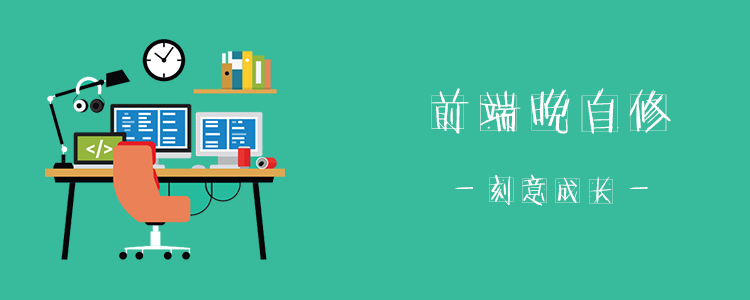
<style>
.page{position:relative;width:750px;height:300px;background:#38bb9c}
.page>*{position:absolute;margin:0}
.t1{font:50px "FZNHT";color:#ffffff}
.t2{font:33.3px "FZNHT";color:#ffffff}
</style>
<div class="page">
<p class="t1" style="left:431px;top:88px;width:240px;height:46px">前端晚自修</p>
<p class="t2" style="left:455px;top:174px;width:193px;height:32px">- 刻意成长 -</p>
</div>
